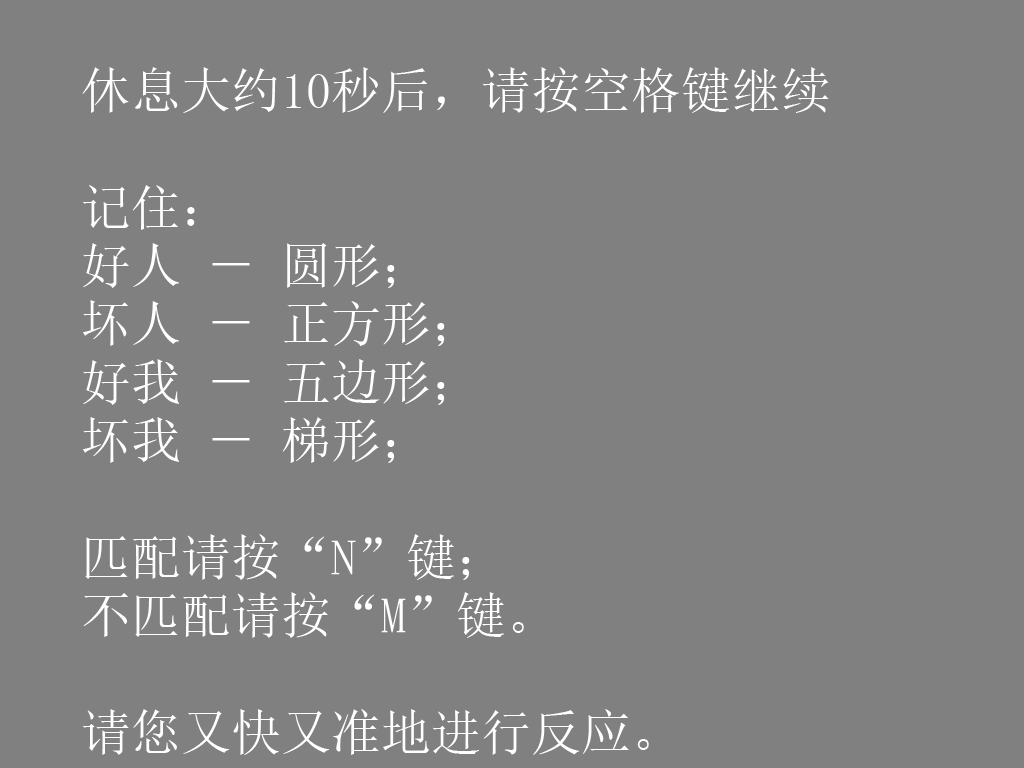
<style>
.page{position:relative;width:1024px;height:768px;background:#808080}
.page>*{position:absolute;margin:0}
.t1{font:50px/58.3px "SimSun";color:#ffffff}
</style>
<div class="page">
<p class="t1" style="left:82px;top:67px;width:747px;height:688px">休息大约10秒后，请按空格键继续<br><br>记住： <br>好人 － 圆形；<br>坏人 － 正方形；<br>好我 － 五边形；<br>坏我 － 梯形；<br><br>匹配请按“N”键；<br>不匹配请按“M”键。<br><br>请您又快又准地进行反应。</p>
</div>
